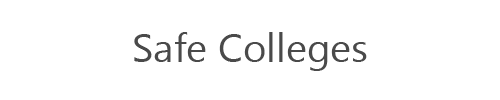
<style>
.page{position:relative;width:500px;height:100px;background:#ffffff}
.page>*{position:absolute;margin:0}
.t1{font:40px "Gadugi";color:#4a4a4a}
</style>
<div class="page">
<p class="t1" style="left:134px;top:32px;width:233px;height:39px">Safe Colleges</p>
</div>
